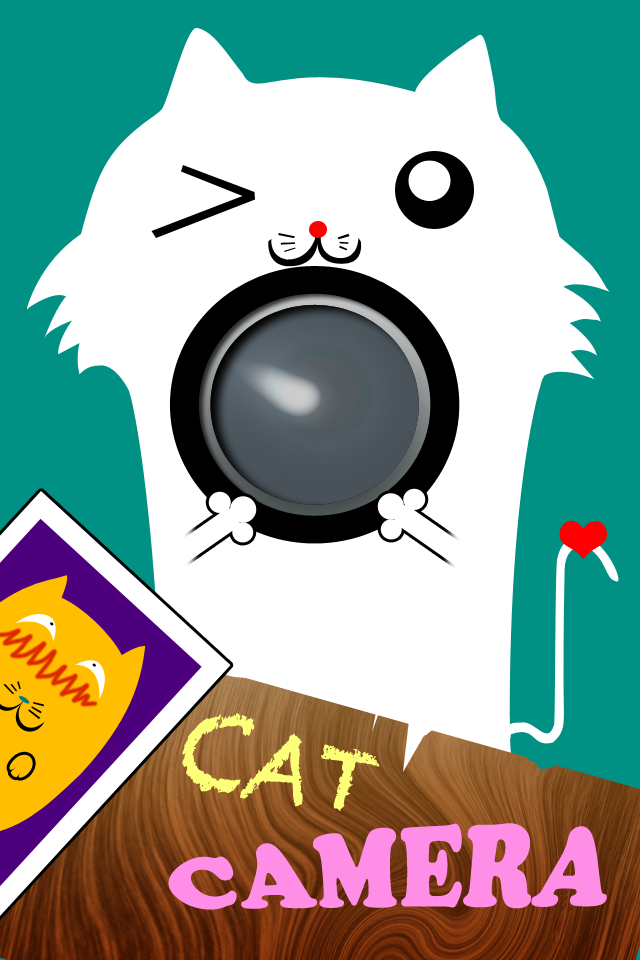
<style>
.page{position:relative;width:640px;height:960px;background:#ffffff}
.page>*{position:absolute;margin:0}
.t1{font:90px "Chalkduster";color:#fdff78}
.t2{font:90px "CooperBlack";color:#ff8ee6}
</style>
<div class="page">
<p class="t1" style="left:182px;top:713px;width:198px;height:98px;rotate:17deg">CAT</p>
<p class="t2" style="left:168px;top:823px;width:439px;height:87px;rotate:-2deg">CAMERA</p>
</div>
